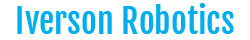
<style>
.page{position:relative;width:250px;height:40px;background:#ffffff}
.page>*{position:absolute;margin:0}
.t1{font:34px "FjallaOne-Regular";color:#00adee}
</style>
<div class="page">
<p class="t1" style="left:17px;top:3px;width:217px;height:31px">Iverson Robotics</p>
</div>
